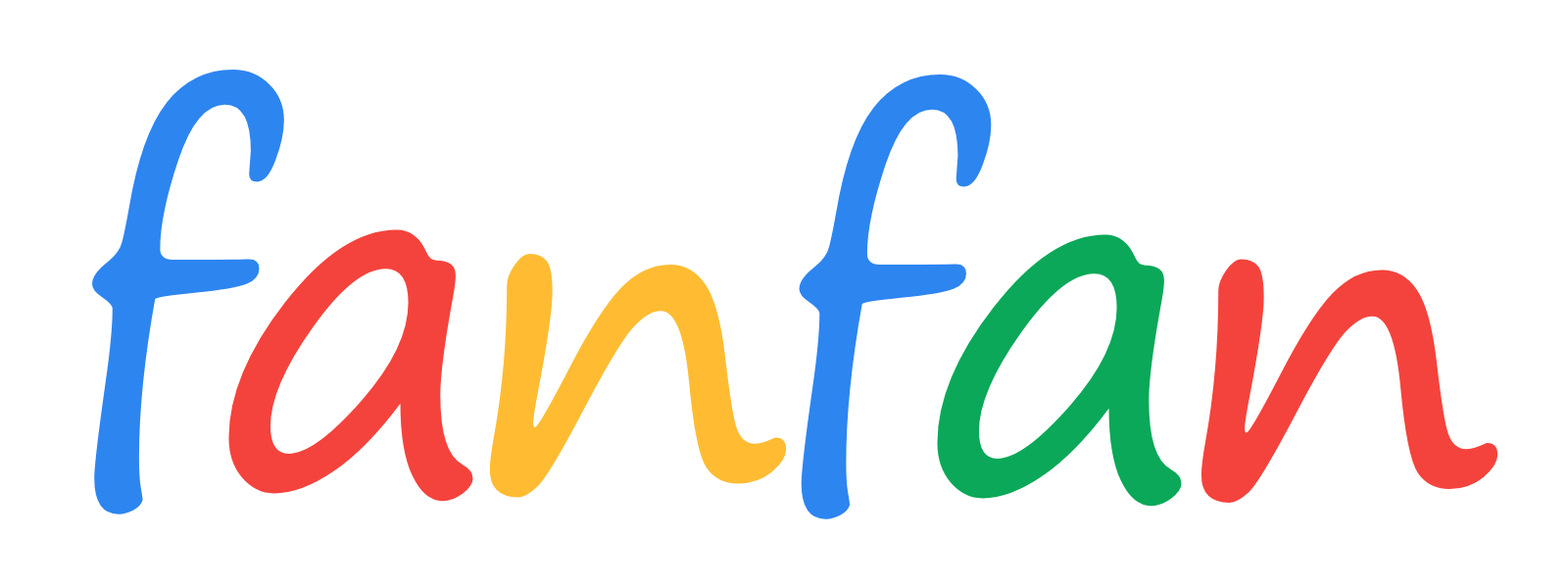
<style>
.page{position:relative;width:1568px;height:588px;background:#ffffff}
.page>*{position:absolute;margin:0}
.t1{font:490px "SegoePrint";color:#2d85f0}
.t2{font:490px "SegoePrint";color:#f4433c}
.t3{font:490px "SegoePrint";color:#0aa858}
.t4{font:490px "SegoePrint";color:#ffbc32}
</style>
<div class="page">
<p class="t1" style="left:92px;top:70px;width:192px;height:444px">f</p>
<p class="t1" style="left:799px;top:74px;width:193px;height:445px">f</p>
<p class="t2" style="left:228px;top:229px;width:245px;height:273px">a</p>
<p class="t3" style="left:937px;top:234px;width:245px;height:273px">a</p>
<p class="t4" style="left:489px;top:253px;width:298px;height:245px">n</p>
<p class="t2" style="left:1200px;top:259px;width:298px;height:244px">n</p>
</div>
